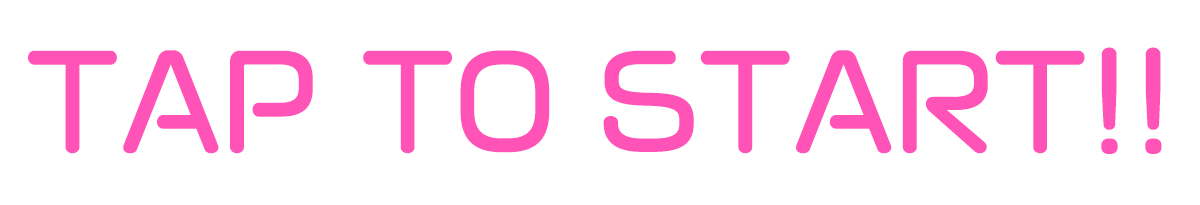
<style>
.page{position:relative;width:1200px;height:205px;background:#ffffff}
.page>*{position:absolute;margin:0}
.t1{font:120px "VDL-MegaMaru-Regular";color:#ff53b8;font-weight:bold}
</style>
<div class="page">
<p class="t1" style="left:28px;top:47px;width:1134px;height:107px">TAP TO START!!</p>
</div>
